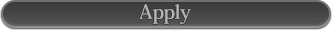
<style>
.page{position:relative;width:332px;height:30px}
.page>*{position:absolute;margin:0}
.t1{font:20px "HeiseiMinStd-W7";color:#b6b6b6}
</style>
<div class="page">
<p class="t1" style="left:139px;top:4px;width:52px;height:20px">Apply</p>
</div>
